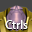
<style>
.page{position:relative;width:32px;height:32px;background:#454545}
.page>*{position:absolute;margin:0}
.t1{font:12px "MyriadPro-Regular";color:#ffffff}
</style>
<div class="page">
<p class="t1" style="left:5px;top:20px;width:23px;height:9px">Ctrls</p>
</div>
